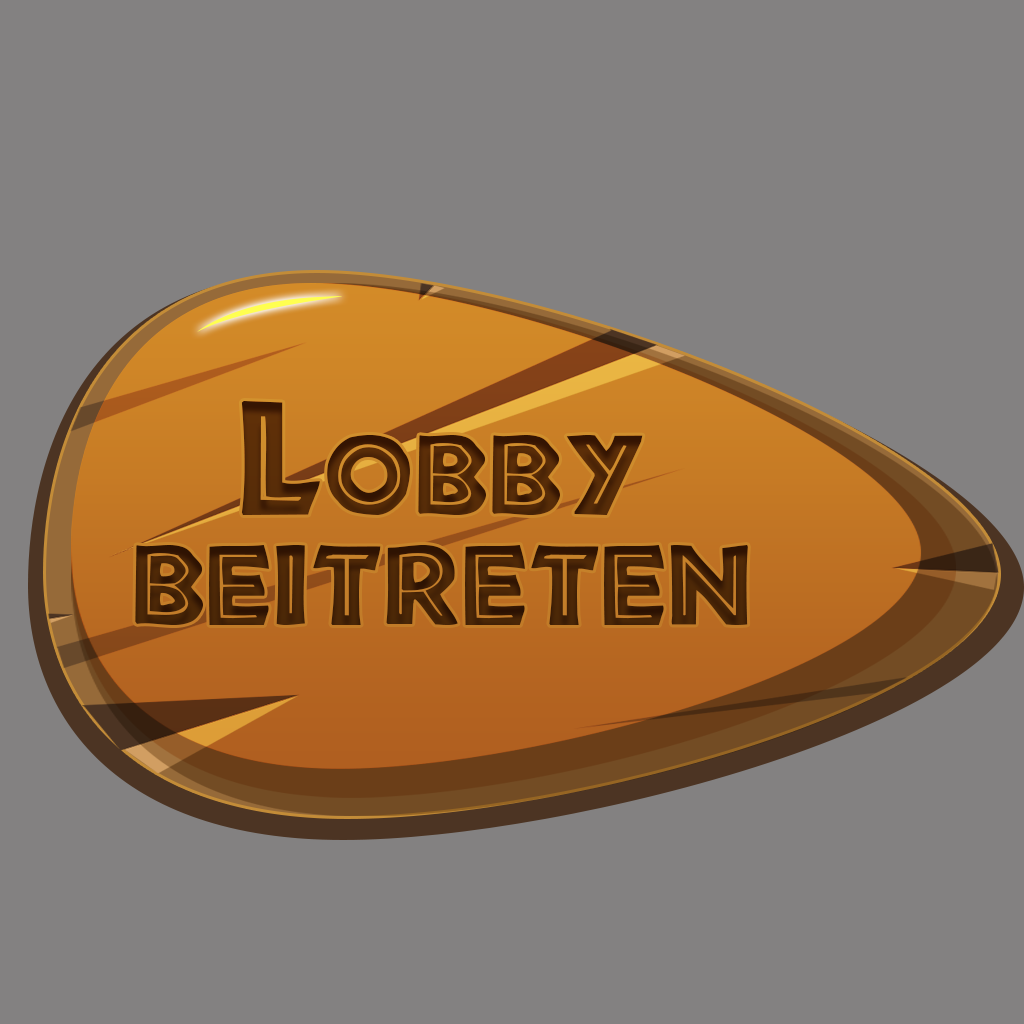
<style>
.page{position:relative;width:1024px;height:1024px;background:#838181}
.page>*{position:absolute;margin:0}
.t1{font:150px/110px "African";color:#53320b;font-variant:small-caps}
</style>
<div class="page">
<p class="t1" style="left:135px;top:401px;width:613px;height:224px;text-align:center">Lobby <br>beitreten</p>
</div>
